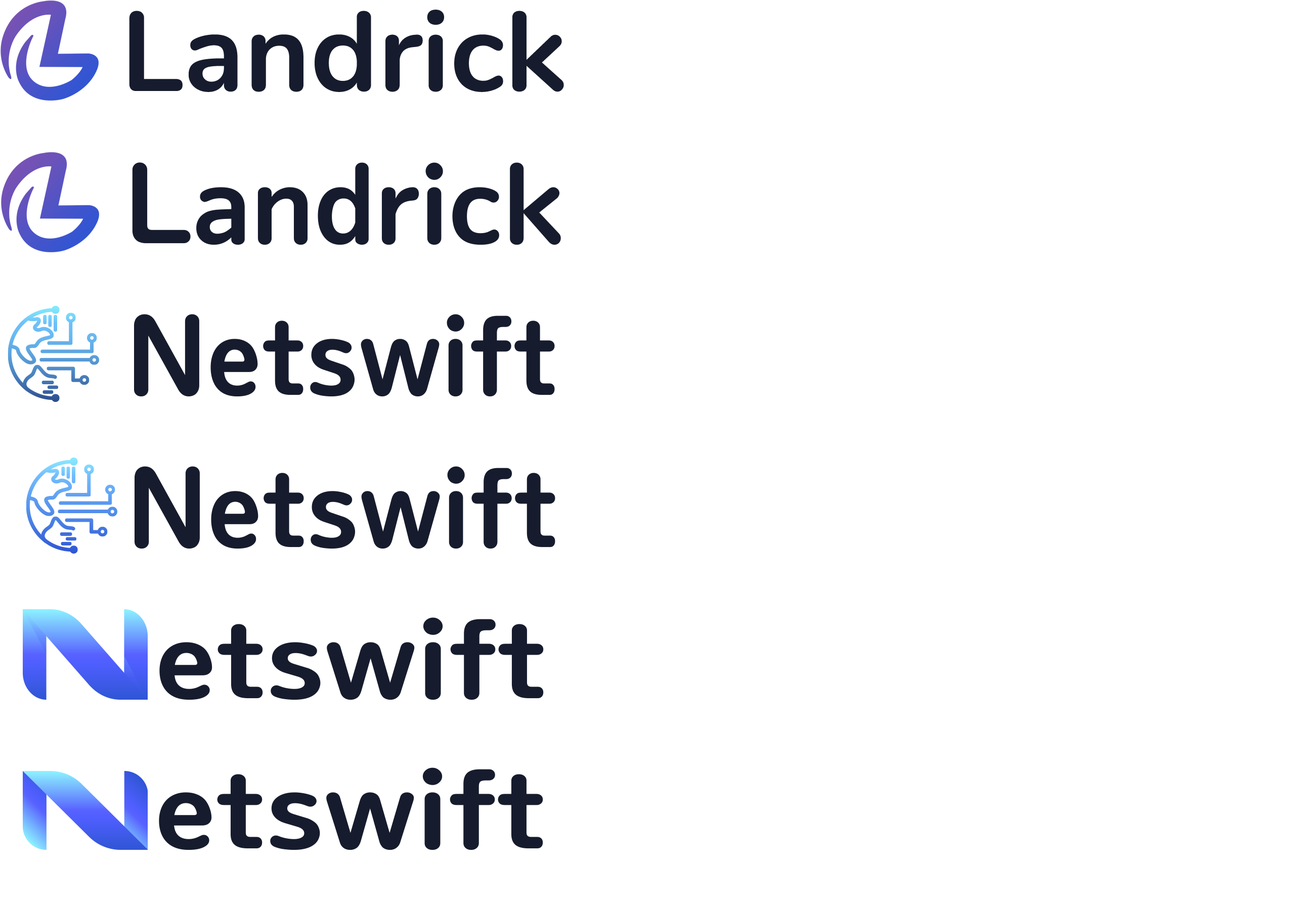
<style>
.page{position:relative;width:1310px;height:910px;background:#ffffff}
.page>*{position:absolute;margin:0}
.t1{font:102.7px "NudMotoyaMaruW55-W5";color:#161c2d}
.t2{font:102.7px "NudMotoyaMaruW55-W5";color:#161c2d;scale:1.12 1}
</style>
<div class="page">
<p class="t1" style="left:132px;top:162px;width:429px;height:83px">Landrick</p>
<p class="t1" style="left:134px;top:314px;width:421px;height:83px">Netswift</p>
<p class="t1" style="left:135px;top:466px;width:420px;height:83px">Netswift</p>
<p class="t2" style="left:159px;top:618px;width:385px;height:82px">etswift</p>
<p class="t2" style="left:159px;top:768px;width:384px;height:83px">etswift</p>
</div>
